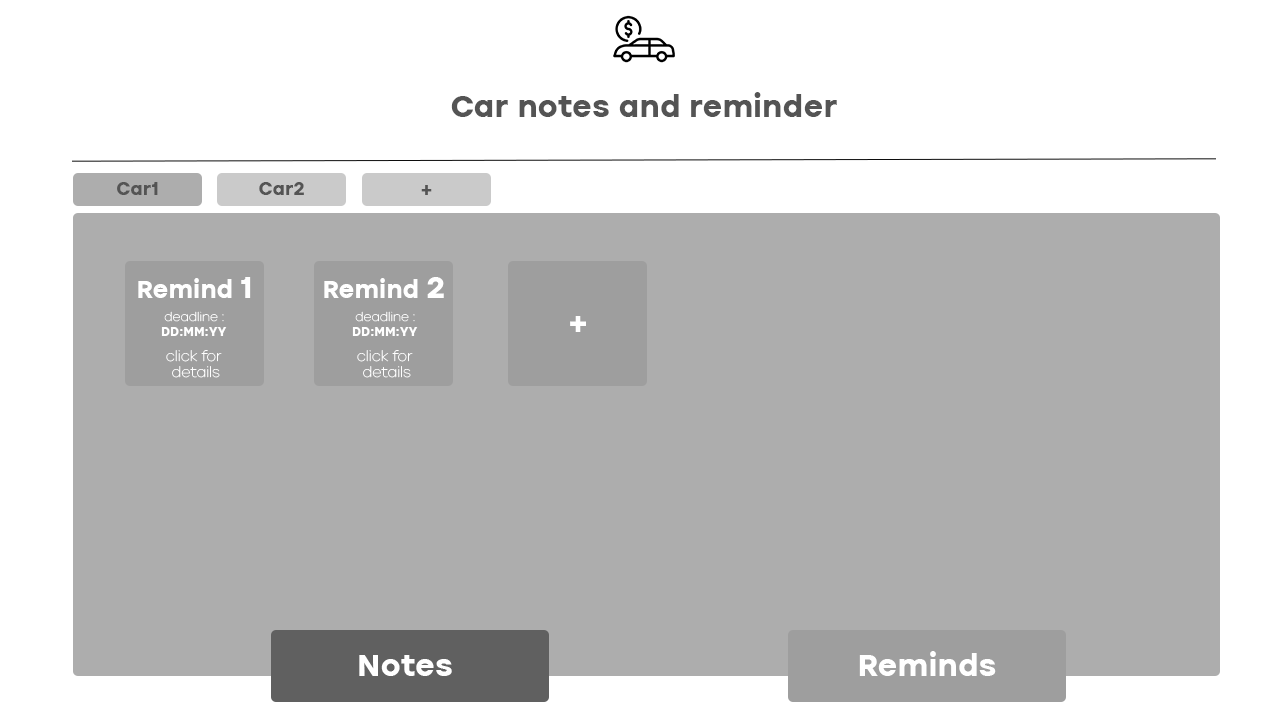
<style>
.page{position:relative;width:1280px;height:720px;background:#adadad}
.page>*{position:absolute;margin:0}
.t1{font:30px "ICTV-Bold";color:#545454}
.t2{font:18px "ICTV-Bold";color:#545454}
.t3{font:24px "ICTV-Bold";color:#ffffff}
.t4{font:30px "ICTV-Bold";color:#ffffff}
.t5{font:12px "ICTV-Thin";color:#ffffff}
.t6{font:12px "ICTV-Bold";color:#ffffff}
.t7{font:14px "ICTV-Thin";color:#ffffff}
</style>
<div class="page">
<p class="t1" style="left:451px;top:92px;width:386px;height:25px">Car notes and reminder</p>
<p class="t2" style="left:117px;top:182px;width:41px;height:13px">Car1</p>
<p class="t2" style="left:259px;top:182px;width:45px;height:13px">Car2</p>
<p class="t2" style="left:421px;top:185px;width:11px;height:10px">+</p>
<p class="t3" style="left:138px;top:277px;width:113px;height:21px">Remind <span class="t4">1</span></p>
<p class="t3" style="left:324px;top:277px;width:120px;height:21px">Remind <span class="t4">2</span></p>
<p class="t5" style="left:164px;top:311px;width:60px;height:11px">deadline :</p>
<p class="t5" style="left:355px;top:311px;width:60px;height:11px">deadline :</p>
<p class="t4" style="left:570px;top:316px;width:16px;height:16px">+</p>
<p class="t6" style="left:161px;top:327px;width:66px;height:9px">DD:MM:YY</p>
<p class="t6" style="left:352px;top:327px;width:66px;height:9px">DD:MM:YY</p>
<p class="t7" style="left:166px;top:350px;width:56px;height:28px;text-align:center">click for<br> details</p>
<p class="t7" style="left:357px;top:350px;width:56px;height:28px;text-align:center">click for<br> details</p>
<p class="t4" style="left:859px;top:651px;width:137px;height:25px">Reminds</p>
<p class="t4" style="left:359px;top:655px;width:93px;height:21px">Notes</p>
</div>
